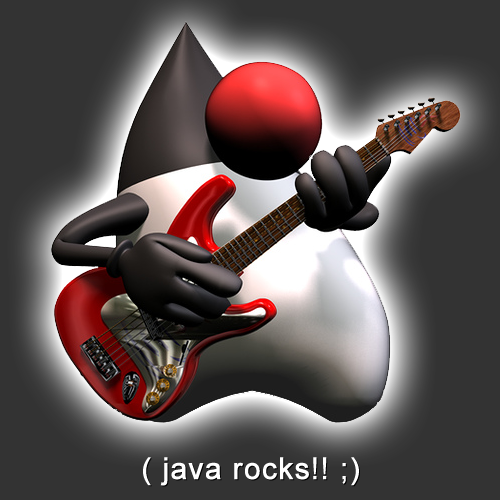
<style>
.page{position:relative;width:500px;height:500px;background:#333333}
.page>*{position:absolute;margin:0}
.t1{font:30px "ArialMT";letter-spacing:0.018em;color:#ffffff;font-weight:bold}
</style>
<div class="page">
<p class="t1" style="left:143px;top:457px;width:216px;height:29px">( java rocks!! ;)</p>
</div>
